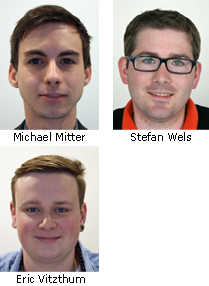
<style>
.page{position:relative;width:209px;height:286px;background:#ffffff}
.page>*{position:absolute;margin:0}
.t1{font:11px "Verdana";color:#000000;scale:0.94 1}
</style>
<div class="page">
<p class="t1" style="left:14px;top:132px;width:71px;height:9px">Michael Mitter</p>
<p class="t1" style="left:131px;top:132px;width:60px;height:9px">Stefan Wels</p>
<p class="t1" style="left:17px;top:274px;width:68px;height:9px">Eric Vitzthum</p>
</div>
